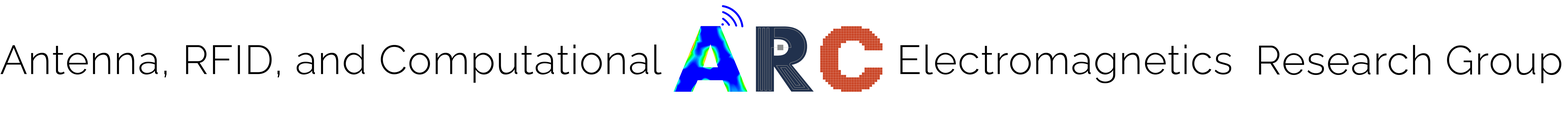
<style>
.page{position:relative;width:1568px;height:117px;background:#ffffff}
.page>*{position:absolute;margin:0}
.t1{font:40.5px "RalewayRoman-Light";letter-spacing:0.02em;color:#000000}
</style>
<div class="page">
<p class="t1" style="left:0px;top:45px;width:1231px;height:38px">Antenna, RFID, and Computational                     Electromagnetics</p>
<p class="t1" style="left:1259px;top:45px;width:303px;height:38px">Research Group</p>
</div>
